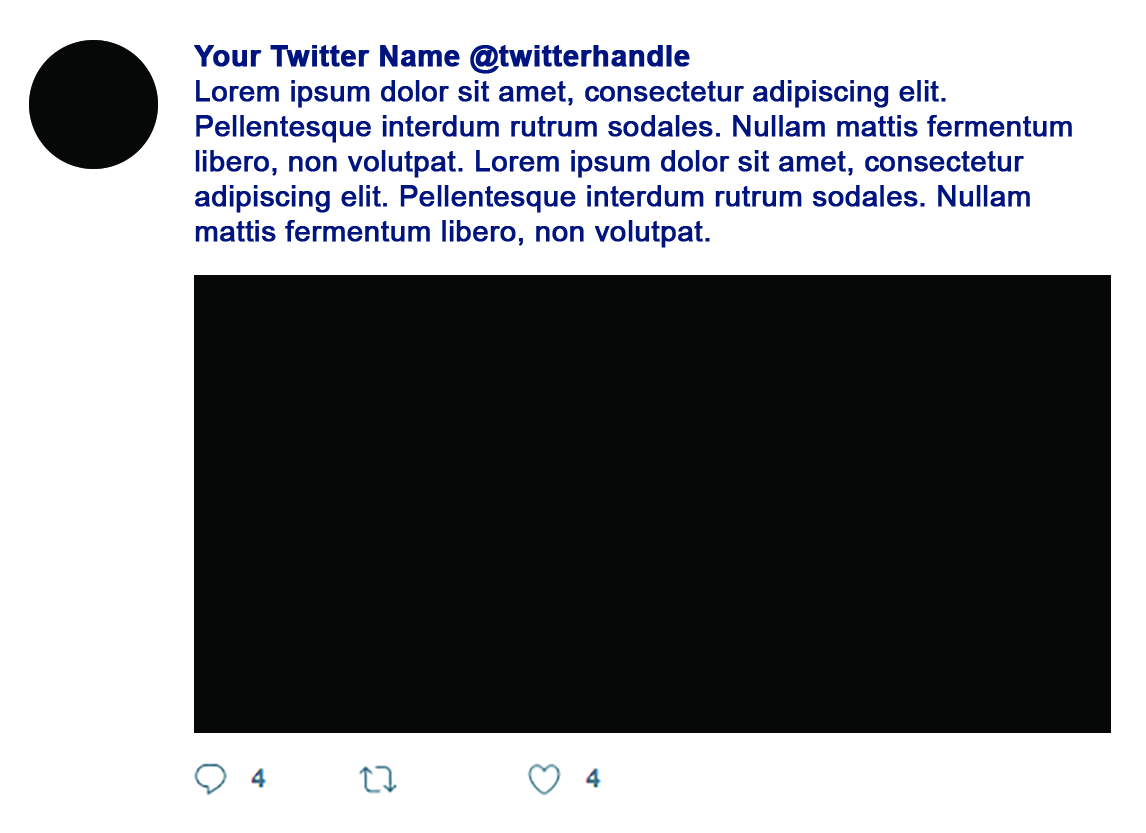
<style>
.page{position:relative;width:1146px;height:833px;background:#ffffff}
.page>*{position:absolute;margin:0}
.t1{font:29.2px "ArialMT";color:#00147f;font-weight:bold}
.t2{font:29.2px "Arial-BoldMT";color:#00147f;font-weight:bold}
</style>
<div class="page">
<p class="t1" style="left:194px;top:45px;width:878px;height:203px"><span class="t2">Your Twitter Name @twitterhandle<br></span>Lorem ipsum dolor sit amet, consectetur adipiscing elit. Pellentesque interdum rutrum sodales. Nullam mattis fermentum libero, non volutpat. Lorem ipsum dolor sit amet, consectetur adipiscing elit. Pellentesque interdum rutrum sodales. Nullam mattis fermentum libero, non volutpat.</p>
</div>
